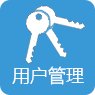
<style>
.page{position:relative;width:95px;height:95px;background:#3998d6}
.page>*{position:absolute;margin:0}
.t1{font:18px "MicrosoftYaHei";color:#ffffff}
</style>
<div class="page">
<p class="t1" style="left:12px;top:66px;width:72px;height:19px">用户管理</p>
</div>
